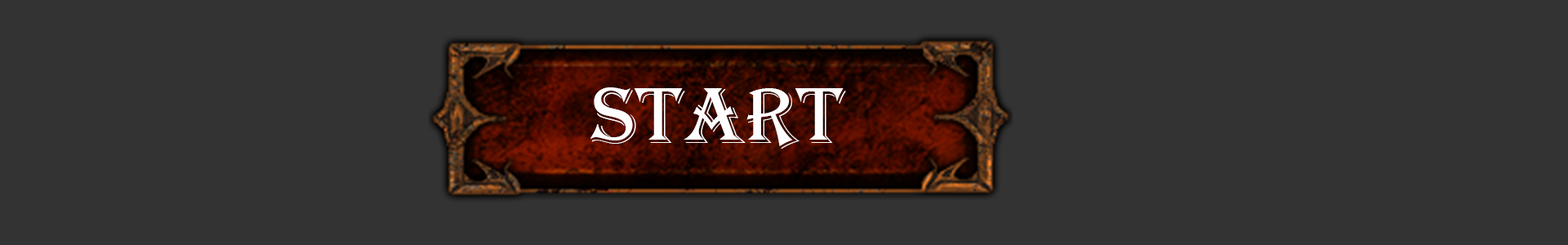
<style>
.page{position:relative;width:1568px;height:245px;background:#333333}
.page>*{position:absolute;margin:0}
.t1{font:81.7px "Algerian";color:#fefefe}
</style>
<div class="page">
<p class="t1" style="left:590px;top:87px;width:256px;height:62px">Start</p>
</div>
